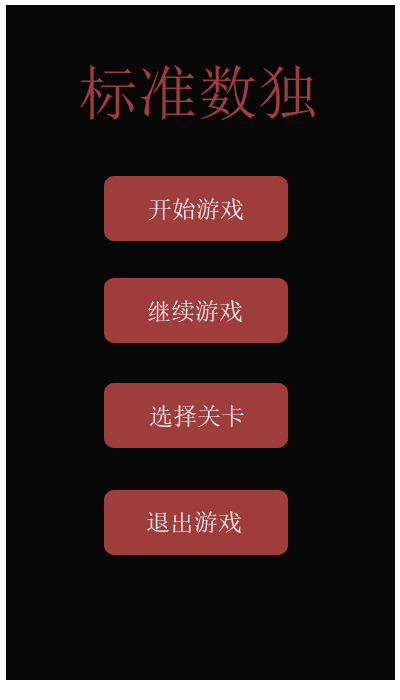
<style>
.page{position:relative;width:400px;height:700px;background:#080707}
.page>*{position:absolute;margin:0}
.t1{font:60px "SimSun";color:#9f3d3d}
.t2{font:24px "SimSun";color:#fcf4f4}
</style>
<div class="page">
<p class="t1" style="left:80px;top:65px;width:235px;height:55px">标准数独</p>
<p class="t2" style="left:149px;top:198px;width:94px;height:22px">开始游戏</p>
<p class="t2" style="left:148px;top:300px;width:94px;height:22px">继续游戏</p>
<p class="t2" style="left:149px;top:405px;width:95px;height:22px">选择关卡</p>
<p class="t2" style="left:147px;top:511px;width:94px;height:22px">退出游戏</p>
</div>
